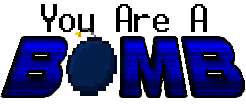
<style>
.page{position:relative;width:246px;height:106px;background:#ffffff}
.page>*{position:absolute;margin:0}
.t1{font:36.7px "Terminal";letter-spacing:0.025em;color:#000000}
</style>
<div class="page">
<p class="t1" style="left:41px;top:4px;width:166px;height:28px">You Are A</p>
</div>
